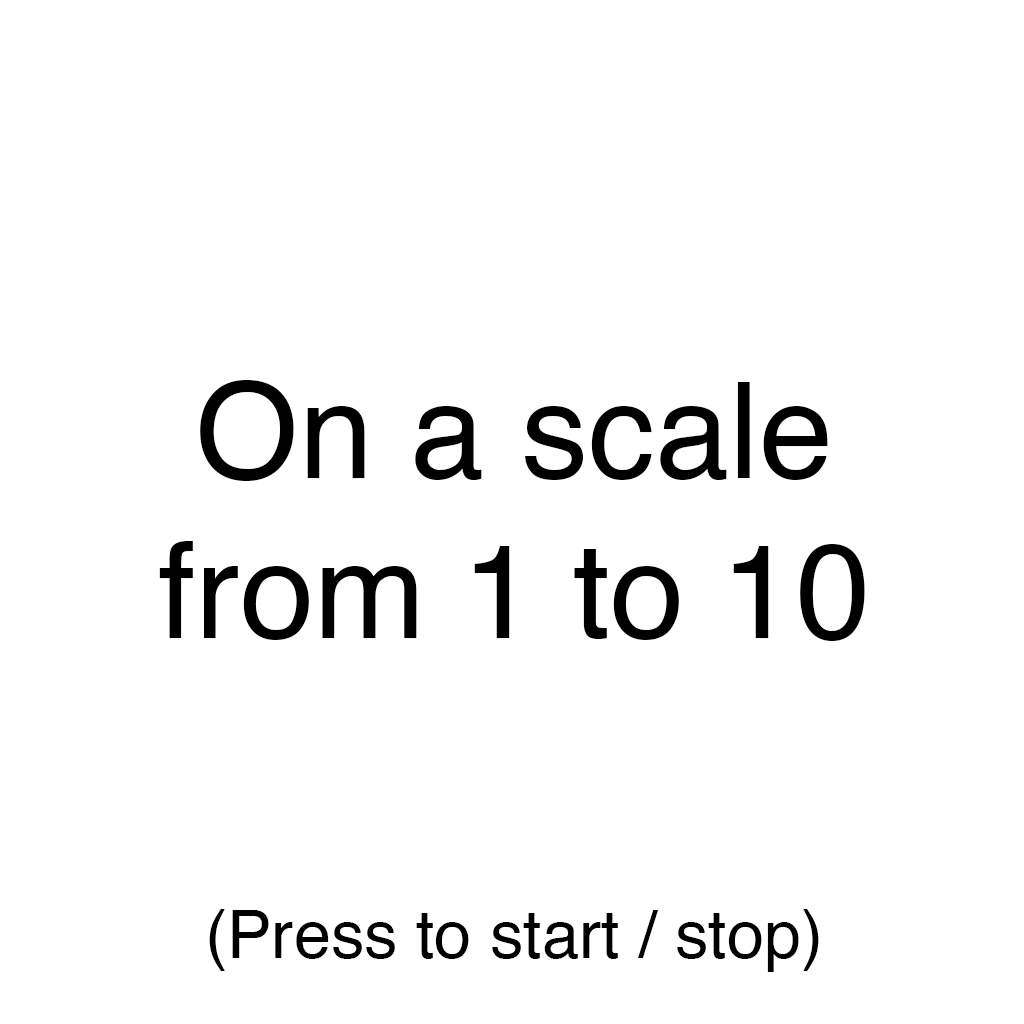
<style>
.page{position:relative;width:1024px;height:1024px;background:#ffffff}
.page>*{position:absolute;margin:0}
.t1{font:133.3px "Helvetica";color:#000000}
.t2{font:66.7px "Helvetica";color:#000000}
</style>
<div class="page">
<p class="t1" style="left:159px;top:380px;width:706px;height:592px;text-align:center">On a scale<br>from 1 to 10<br><br><span class="t2"><br>(Press to start / stop)</span></p>
</div>
